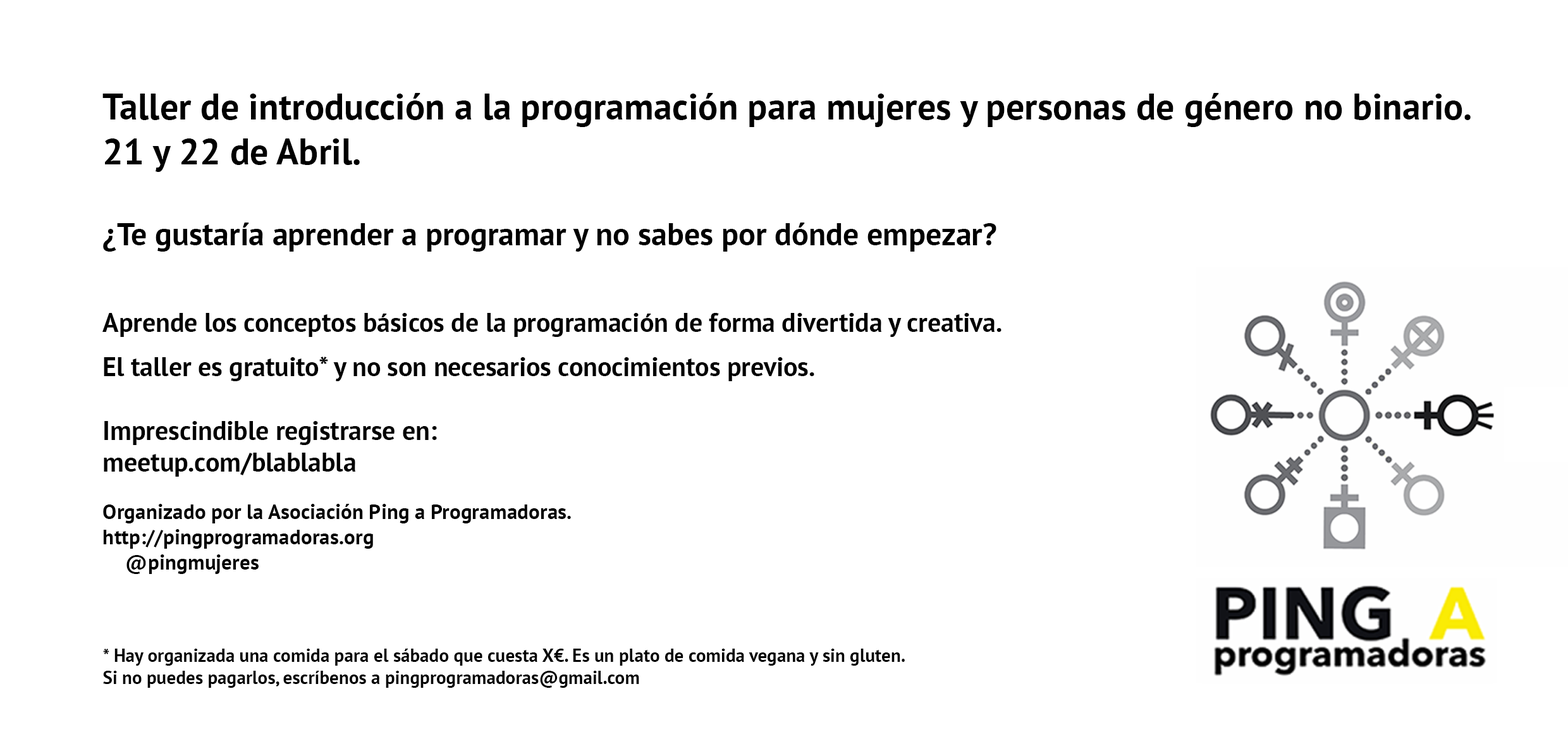
<style>
.page{position:relative;width:1568px;height:739px;background:#ffffff}
.page>*{position:absolute;margin:0}
.t1{font:36.9px "PTSans-Bold";color:#000000}
.t2{font:31.6px "PTSans-Bold";color:#000000}
.t3{font:26.3px "PTSans-Bold";color:#000000}
.t4{font:21.1px "PTSans-Bold";color:#000000}
.t5{font:18.4px "PTSans-Bold";color:#000000}
</style>
<div class="page">
<p class="t1" style="left:102px;top:93px;width:1369px;height:34px">Taller de introducción a la programación para mujeres y personas de género no binario.</p>
<p class="t1" style="left:105px;top:138px;width:255px;height:34px">21 y 22 de Abril.</p>
<p class="t2" style="left:103px;top:223px;width:893px;height:29px">¿Te gustaría aprender a programar y no sabes por dónde empezar?</p>
<p class="t3" style="left:102px;top:313px;width:899px;height:24px">Aprende los conceptos básicos de la programación de forma divertida y creativa.</p>
<p class="t3" style="left:104px;top:357px;width:710px;height:24px">El taller es gratuito* y no son necesarios conocimientos previos.</p>
<p class="t3" style="left:104px;top:421px;width:333px;height:56px">Imprescindible registrarse en:<br>meetup.com/blablabla</p>
<p class="t4" style="left:103px;top:504px;width:468px;height:70px">Organizado por la Asociación Ping a Programadoras.<br>http://pingprogramadoras.org<br> @pingmujeres</p>
<p class="t5" style="left:103px;top:649px;width:802px;height:39px">* Hay organizada una comida para el sábado que cuesta X€. Es un plato de comida vegana y sin gluten. <br>Si no puedes pagarlos, escríbenos a pingprogramadoras@gmail.com</p>
</div>
